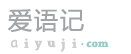
<style>
.page{position:relative;width:131px;height:54px;background:#ffffff}
.page>*{position:absolute;margin:0}
.t1{font:24px "MicrosoftYaHei";color:#a1a5a8}
.t2{font:14px "ComicSansMS";color:#cccccc}
.t3{font:14px "ChaparralPro-Bold";color:#cccccc}
.t4{font:12px "ChaparralPro-Bold";color:#99cccc}
</style>
<div class="page">
<p class="t1" style="left:8px;top:9px;width:24px;height:23px">爱</p>
<p class="t1" style="left:34px;top:9px;width:24px;height:23px">语</p>
<p class="t1" style="left:60px;top:9px;width:24px;height:23px">记</p>
<p class="t2" style="left:11px;top:39px;width:7px;height:9px">a</p>
<p class="t3" style="left:24px;top:38px;width:5px;height:10px">i</p>
<p class="t3" style="left:34px;top:40px;width:8px;height:11px">y</p>
<p class="t3" style="left:47px;top:40px;width:9px;height:8px">u</p>
<p class="t3" style="left:60px;top:38px;width:5px;height:14px">j</p>
<p class="t3" style="left:72px;top:38px;width:5px;height:10px">i</p>
<p class="t4" style="left:86px;top:41px;width:23px;height:7px">com</p>
<p class="t4" style="left:81px;top:43px;width:3px;height:3px">.</p>
</div>
